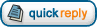
<style>
.page{position:relative;width:97px;height:27px}
.page>*{position:absolute;margin:0}
.t1{font:12px "ArialMT";color:#005f8f;font-weight:bold}
.t2{font:12px "ArialMT";color:#ff9900;font-weight:bold}
</style>
<div class="page">
<p class="t1" style="left:29px;top:8px;width:30px;height:12px">quick</p>
<p class="t2" style="left:60px;top:8px;width:28px;height:12px">reply</p>
</div>
